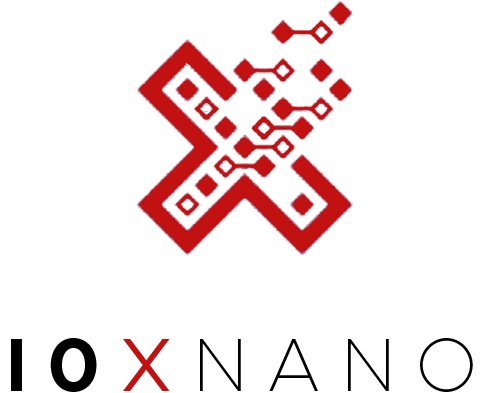
<style>
.page{position:relative;width:483px;height:393px;background:#ffffff}
.page>*{position:absolute;margin:0}
.t1{font:75px "Metropolis-Thin";letter-spacing:-0.01em;color:#000000}
.t2{font:75px "Metropolis-Bold";letter-spacing:-0.01em;color:#000000}
.t3{font:75px "Metropolis-Regular";letter-spacing:-0.01em;color:#c11111}
</style>
<div class="page">
<p class="t1" style="left:11px;top:338px;width:462px;height:54px"><span class="t2">I 0 </span><span class="t3">X</span> N A N O</p>
</div>
